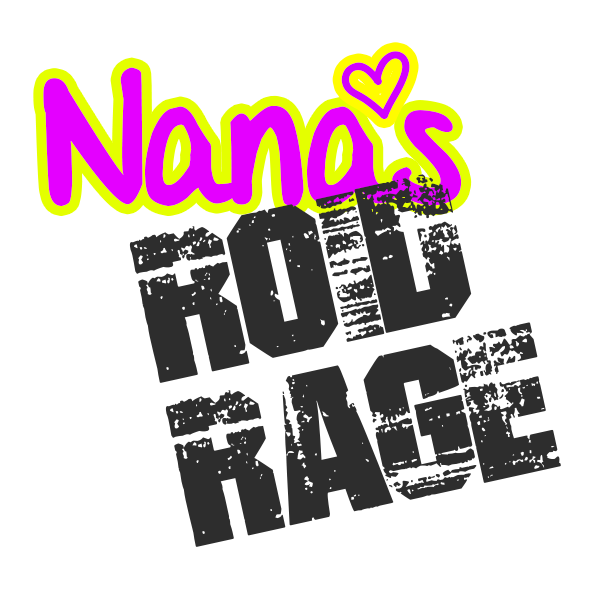
<style>
.page{position:relative;width:600px;height:600px;background:#ffffff}
.page>*{position:absolute;margin:0}
.t1{font:135.5px "AlwaysInMyHeart";letter-spacing:-0.01em;color:#d200ff}
.t2{font:159.2px "DJBAlmostPerfect";letter-spacing:-0.01em;color:#e400ff}
.t3{font:284.3px/167.7px "BADGRUNGE";letter-spacing:-0.01em;color:#2d2d2d}
</style>
<div class="page">
<p class="t1" style="left:341px;top:51px;width:69px;height:69px">]</p>
<p class="t2" style="left:43px;top:67px;width:419px;height:139px">Nanas</p>
<p class="t3" style="left:129px;top:174px;width:432px;height:373px;rotate:-12deg">Roid<br>Rage</p>
</div>
